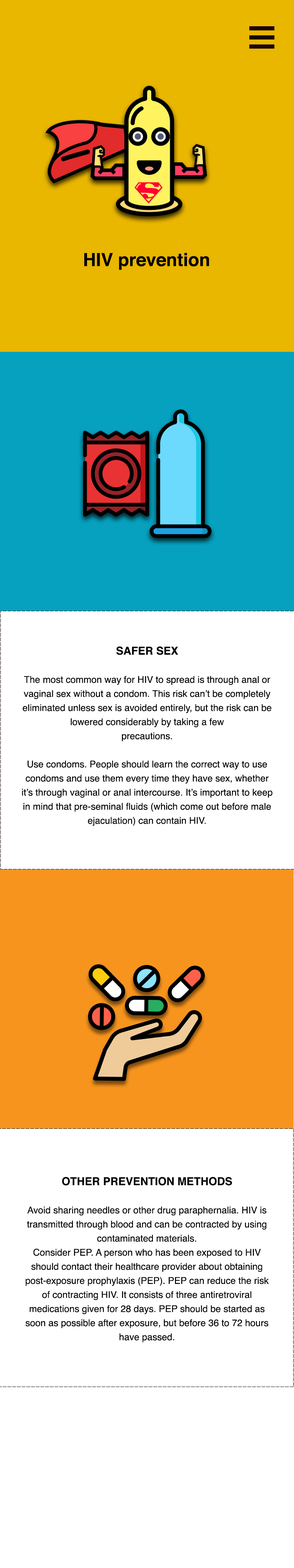
<style>
.page{position:relative;width:294px;height:1568px;background:#ffffff}
.page>*{position:absolute;margin:0}
.t1{font:18px "Helvetica-Bold";color:#000000}
.t2{font:9.4px/14.1px "Helvetica";color:#000000}
.t3{font:11px/14.1px "Helvetica-Bold";color:#000000}
.t4{font:9.4px/14.1px "Helvetica-Bold";color:#000000}
</style>
<div class="page">
<p class="t1" style="left:84px;top:253px;width:125px;height:17px">HIV prevention</p>
<p class="t2" style="left:22px;top:646px;width:250px;height:180px;text-align:center"><span class="t3">SAFER SEX<br></span><br>The most common way for HIV to spread is through anal or vaginal sex without a condom. This risk can’t be completely eliminated unless sex is avoided entirely, but the risk can be <br>lowered considerably by taking a few <br>precautions. <br><br>Use condoms. People should learn the correct way to use condoms and use them every time they have sex, whether it’s through vaginal or anal intercourse. It’s important to keep in mind that pre-seminal fluids (which come out before male ejaculation) can contain HIV.</p>
<p class="t2" style="left:25px;top:1177px;width:244px;height:165px;text-align:center"><span class="t4"><br></span><span class="t3">OTHER PREVENTION METHODS<br></span><br>Avoid sharing needles or other drug paraphernalia. HIV is transmitted through blood and can be contracted by using <br>contaminated materials.<br>Consider PEP. A person who has been exposed to HIV should contact their healthcare provider about obtaining post-exposure prophylaxis (PEP). PEP can reduce the risk of contracting HIV. It consists of three antiretroviral <br>medications given for 28 days. PEP should be started as soon as possible after exposure, but before 36 to 72 hours have passed.</p>
</div>
